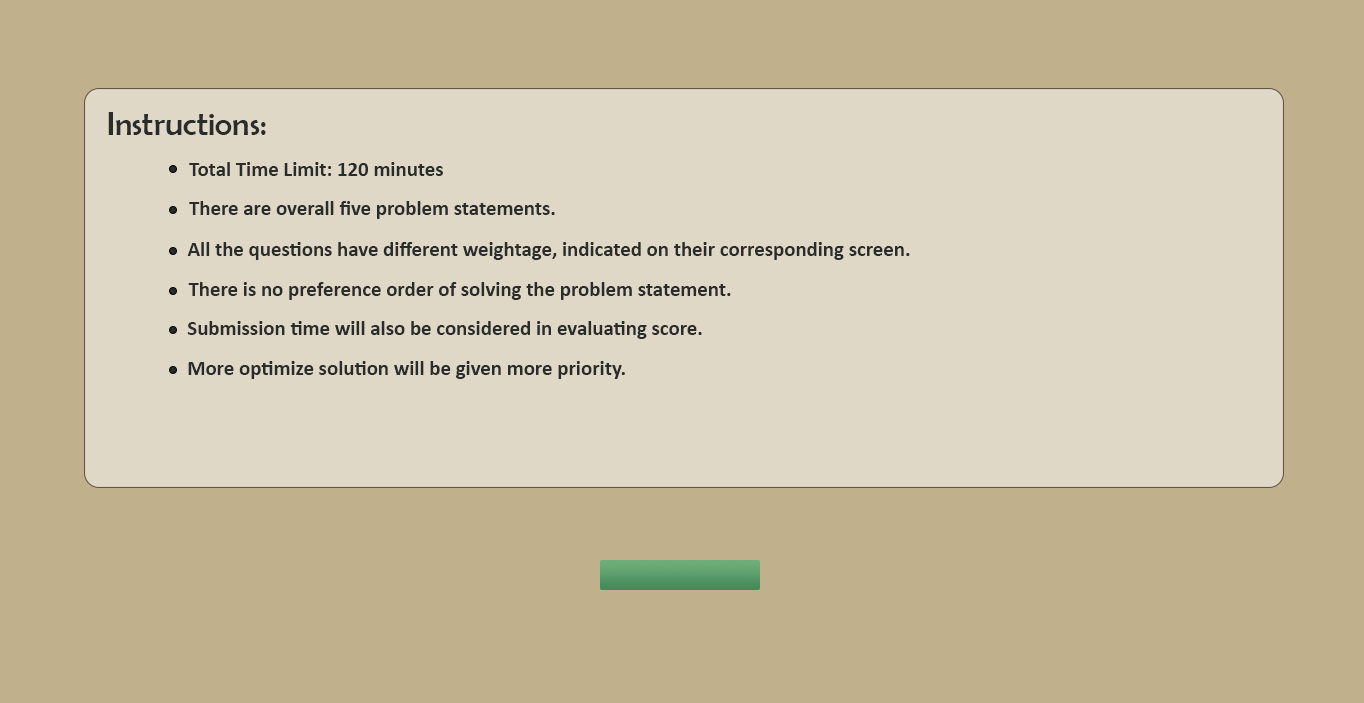
<style>
.page{position:relative;width:1364px;height:703px;background:#c0b08c}
.page>*{position:absolute;margin:0}
.t1{font:33.3px "BerlinSansFB-Reg";color:#292c2a}
.t2{font:20.8px "Calibri-Bold";color:#292c2a}
</style>
<div class="page">
<p class="t1" style="left:108px;top:112px;width:158px;height:23px">Instructions:</p>
<p class="t2" style="left:189px;top:162px;width:254px;height:14px">Total Time Limit: 120 minutes</p>
<p class="t2" style="left:189px;top:201px;width:366px;height:18px">There are overall five problem statements.</p>
<p class="t2" style="left:187px;top:242px;width:723px;height:18px">All the questions have different weightage, indicated on their corresponding screen.</p>
<p class="t2" style="left:188px;top:282px;width:543px;height:18px">There is no preference order of solving the problem statement.</p>
<p class="t2" style="left:187px;top:321px;width:515px;height:18px">Submission time will also be considered in evaluating score.</p>
<p class="t2" style="left:188px;top:361px;width:437px;height:18px">More optimize solution will be given more priority.</p>
</div>
